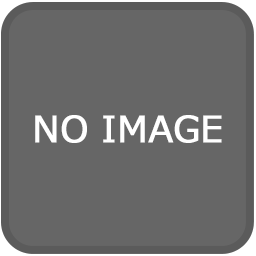
<style>
.page{position:relative;width:256px;height:256px;background:#666666}
.page>*{position:absolute;margin:0}
.t1{font:36px "Meiryo";color:#ffffff;font-weight:bold}
</style>
<div class="page">
<p class="t1" style="left:35px;top:115px;width:187px;height:28px">NO IMAGE</p>
</div>
